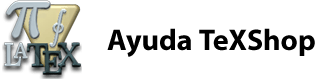
<style>
.page{position:relative;width:320px;height:80px;background:#ffffff}
.page>*{position:absolute;margin:0}
.t1{font:30px "MyriadPro-Bold";color:#000000}
</style>
<div class="page">
<p class="t1" style="left:107px;top:28px;width:208px;height:29px">Ayuda TeXShop</p>
</div>
